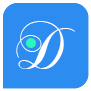
<style>
.page{position:relative;width:91px;height:91px;background:#2d8cf0}
.page>*{position:absolute;margin:0}
.t1{font:60px "ChopinScript";letter-spacing:0.026em;color:#ffffff}
</style>
<div class="page">
<p class="t1" style="left:16px;top:21px;width:59px;height:48px">D</p>
</div>
